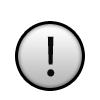
<style>
.page{position:relative;width:100px;height:100px;background:#ffffff}
.page>*{position:absolute;margin:0}
.t1{font:58.4px "MyriadPro-Regular";color:#000000}
</style>
<div class="page">
<p class="t1" style="left:47px;top:36px;width:8px;height:41px">!</p>
</div>
